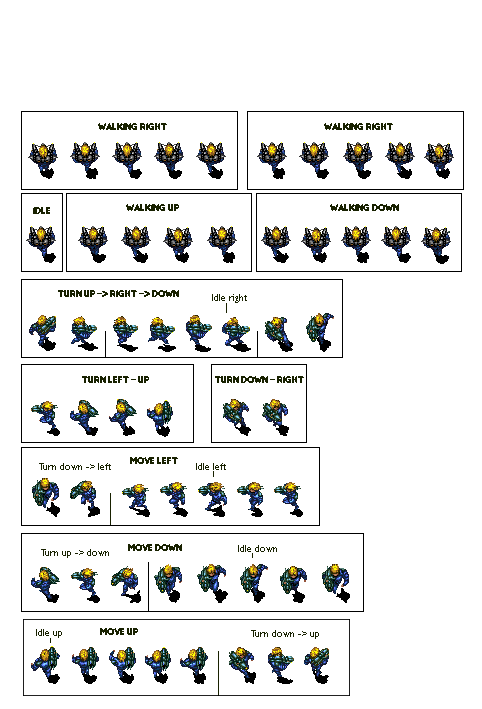
<style>
.page{position:relative;width:482px;height:709px;background:#ffffff}
.page>*{position:absolute;margin:0}
.t1{font:10px "Insaniburger-with-Cheese";color:#182100}
.t2{font:10px "GillSansMT";color:#182100}
</style>
<div class="page">
<p class="t1" style="left:98px;top:123px;width:69px;height:7px">Walking right</p>
<p class="t1" style="left:324px;top:123px;width:69px;height:7px">Walking right</p>
<p class="t1" style="left:33px;top:207px;width:17px;height:7px">Idle</p>
<p class="t1" style="left:126px;top:204px;width:53px;height:7px">Walking up</p>
<p class="t1" style="left:330px;top:204px;width:69px;height:7px">Walking down</p>
<p class="t1" style="left:58px;top:290px;width:121px;height:7px">Turn up -&gt; right -&gt; down</p>
<p class="t2" style="left:212px;top:294px;width:35px;height:9px">Idle right</p>
<p class="t1" style="left:82px;top:376px;width:67px;height:7px">Turn left - up</p>
<p class="t1" style="left:215px;top:376px;width:89px;height:7px">Turn down - right</p>
<p class="t1" style="left:130px;top:457px;width:48px;height:7px">Move left</p>
<p class="t2" style="left:39px;top:463px;width:72px;height:7px">Turn down -&gt; left</p>
<p class="t2" style="left:196px;top:463px;width:30px;height:7px">Idle left</p>
<p class="t1" style="left:128px;top:544px;width:54px;height:7px">Move down</p>
<p class="t2" style="left:238px;top:545px;width:39px;height:7px">Idle down</p>
<p class="t2" style="left:41px;top:549px;width:68px;height:9px">Turn up -&gt; down</p>
<p class="t2" style="left:36px;top:629px;width:26px;height:9px">Idle up</p>
<p class="t1" style="left:100px;top:628px;width:38px;height:7px">Move up</p>
<p class="t2" style="left:251px;top:630px;width:68px;height:9px">Turn down -&gt; up</p>
</div>
